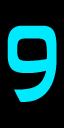
<style>
.page{position:relative;width:64px;height:128px;background:#000000}
.page>*{position:absolute;margin:0}
.t1{font:144px "BankGothicBT-Medium";color:#00eaff;scale:0.6 1}
</style>
<div class="page">
<p class="t1" style="left:7px;top:25px;width:50px;height:77px">9</p>
</div>
